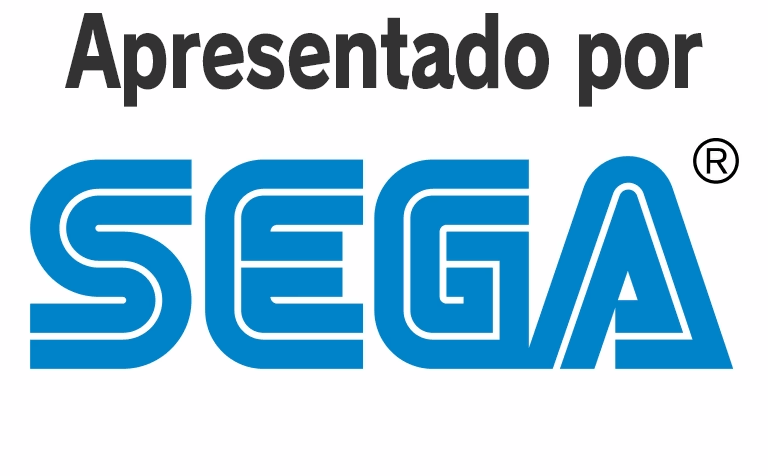
<style>
.page{position:relative;width:768px;height:476px;background:#fffeff}
.page>*{position:absolute;margin:0}
.t1{font:96px "RodinPro-EB";letter-spacing:-0.023em;color:#333233;scale:0.78 1}
</style>
<div class="page">
<p class="t1" style="left:65px;top:13px;width:638px;height:94px">Apresentado por</p>
</div>
